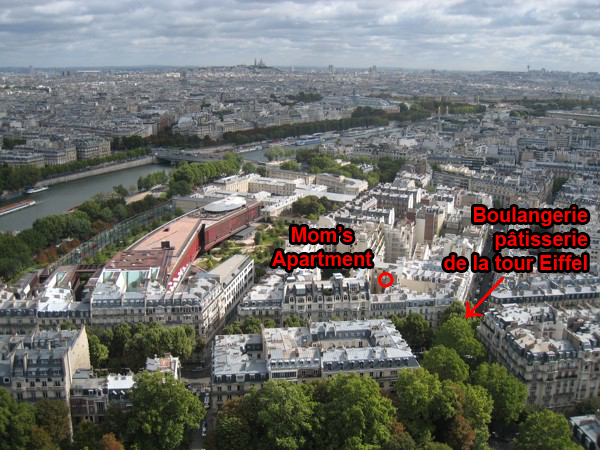
<style>
.page{position:relative;width:600px;height:450px}
.page>*{position:absolute;margin:0}
.t1{font:20px "Arial-BoldMT";color:#ff0000}
.t2{font:60px "Arial-Black";color:#ff0000}
</style>
<div class="page">
<p class="t1" style="left:444px;top:207px;width:144px;height:63px;text-align:right">Boulangerie<br>pâtisserie<br>de la tour Eiffel</p>
<p class="t1" style="left:272px;top:227px;width:100px;height:43px;text-align:center">Mom’s<br>Apartment</p>
<p class="t2" style="left:465px;top:276px;width:40px;height:43px;rotate:-47deg">←</p>
</div>
